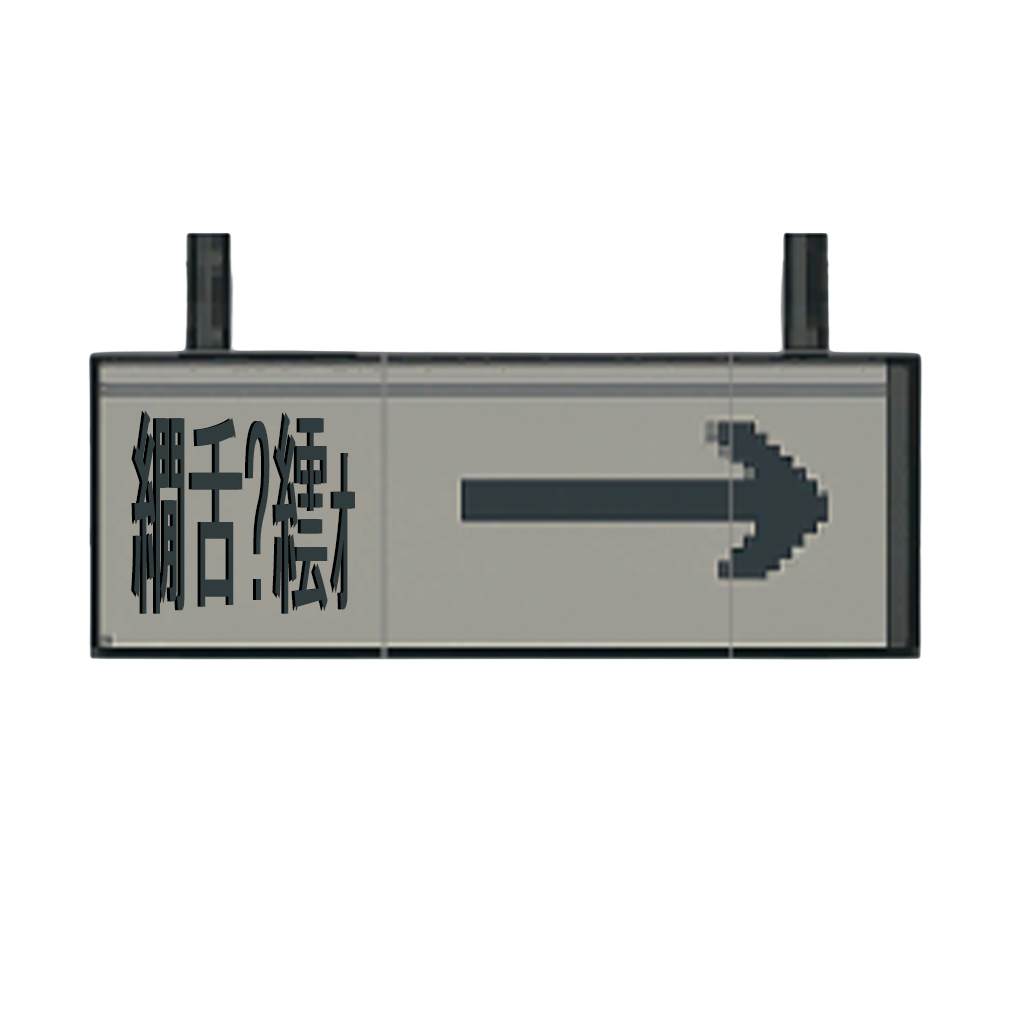
<style>
.page{position:relative;width:1024px;height:1024px;background:#ffffff}
.page>*{position:absolute;margin:0}
.t1{font:220.9px "MS-Gothic";scale:0.26 1}
.t2{font:220.9px "MS-Gothic";color:#303b3e;scale:0.26 1}
</style>
<div class="page">
<p class="t1" style="left:131px;top:410px;width:221px;height:204px">繝舌?繧ｫ</p>
<p class="t2" style="left:134px;top:410px;width:221px;height:204px">繝舌?繧ｫ</p>
</div>
